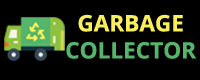
<style>
.page{position:relative;width:200px;height:80px;background:#000000}
.page>*{position:absolute;margin:0}
.t1{font:22.6px "OpenSans-Bold";color:#55b56a}
.t2{font:22.6px "OpenSans-Bold";color:#f8ef5b}
</style>
<div class="page">
<p class="t1" style="left:66px;top:14px;width:131px;height:45px;text-align:center"><span class="t2">GARBAGE<br></span>COLLECTOR</p>
</div>
